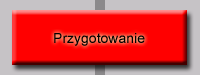
<style>
.page{position:relative;width:200px;height:75px;background:#ff0000}
.page>*{position:absolute;margin:0}
.t1{font:14px "ArialMT";color:#000000}
</style>
<div class="page">
<p class="t1" style="left:54px;top:33px;width:91px;height:13px">Przygotowanie</p>
</div>
